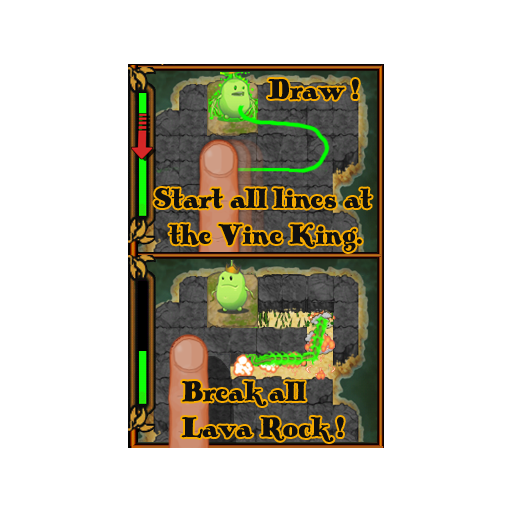
<style>
.page{position:relative;width:512px;height:512px;background:#ffffff}
.page>*{position:absolute;margin:0}
.t1{font:30px "PickworthOldStylePro";color:#101010}
</style>
<div class="page">
<p class="t1" style="left:268px;top:79px;width:91px;height:21px">Draw !</p>
<p class="t1" style="left:154px;top:188px;width:218px;height:64px">Start all lines at<br>   the Vine King.</p>
<p class="t1" style="left:181px;top:380px;width:163px;height:62px">Break all<br>Lava Rock !</p>
</div>
